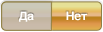
<style>
.page{position:relative;width:103px;height:32px}
.page>*{position:absolute;margin:0}
.t1{font:12px "Helvetica-Bold";color:#ffffff}
</style>
<div class="page">
<p class="t1" style="left:19px;top:11px;width:15px;height:11px">Да</p>
<p class="t1" style="left:66px;top:11px;width:21px;height:10px">Нет</p>
</div>
